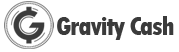
<style>
.page{position:relative;width:179px;height:52px;background:#ffffff}
.page>*{position:absolute;margin:0}
.t1{font:28px "TwCenMT-CondensedExtraBold";letter-spacing:-0.05em;color:#3b3b3b}
</style>
<div class="page">
<p class="t1" style="left:57px;top:16px;width:117px;height:24px">Gravity Cash</p>
</div>
